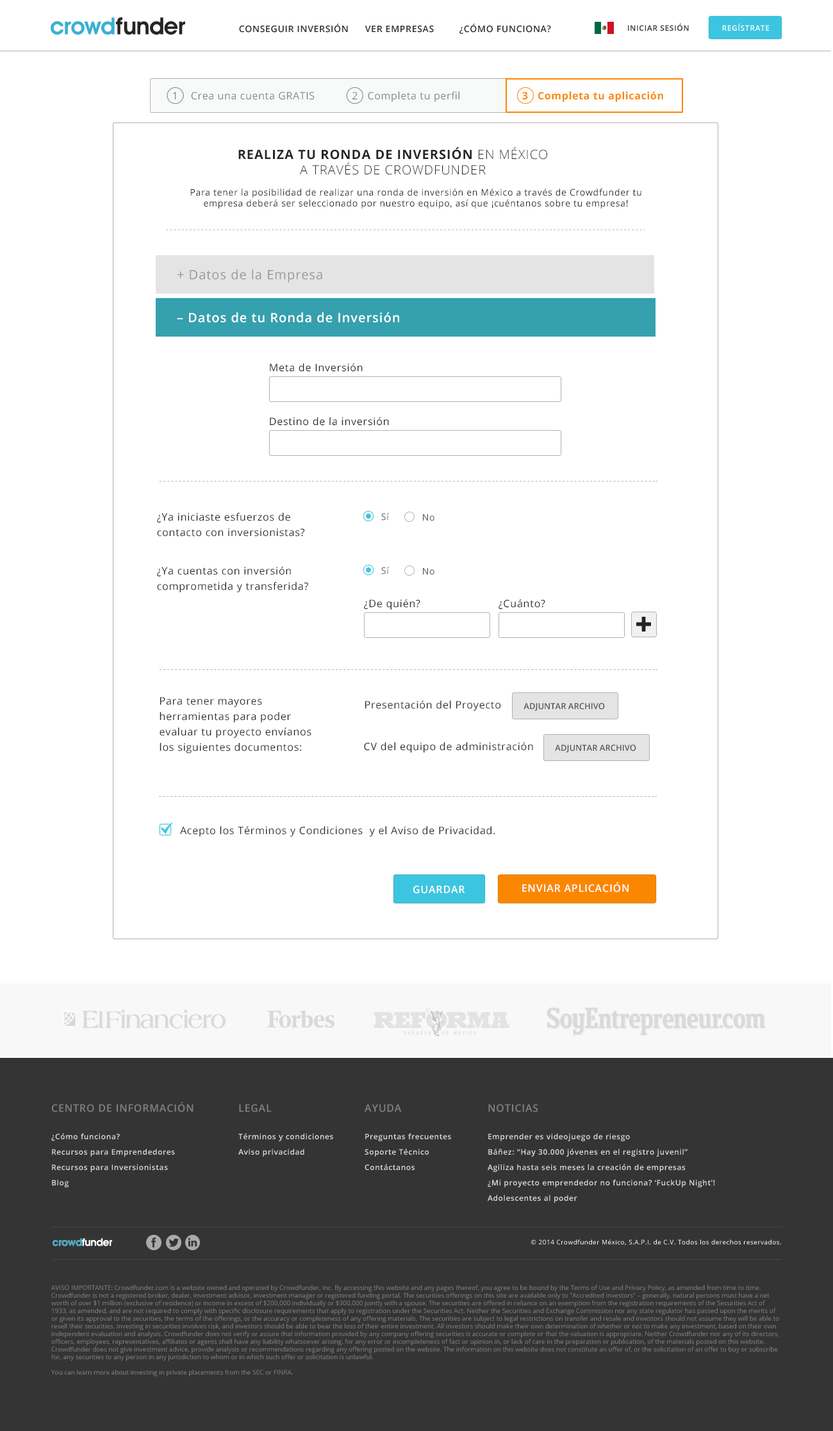
<style>
.page{position:relative;width:833px;height:1431px;background:#ffffff}
.page>*{position:absolute;margin:0}
.t1{font:10.3px "OpenSans";letter-spacing:0.04em;color:#858585}
.t2{font:10.3px "OpenSans-Bold";letter-spacing:0.04em;color:#fb8701}
.t3{font:12.8px "OpenSans-Light";letter-spacing:0.05em;color:#252525;text-transform:uppercase}
.t4{font:12.8px "OpenSans-Bold";letter-spacing:0.05em;color:#252525;text-transform:uppercase}
.t5{font:9px "OpenSans";letter-spacing:0.05em;color:#252525}
.t6{font:12.8px "OpenSans";letter-spacing:0.05em;color:#94979b}
.t7{font:12.8px "OpenSans-Semibold";letter-spacing:0.05em;color:#ffffff}
.t8{font:10.3px "OpenSans";letter-spacing:0.05em;color:#252525}
.t9{font:10.3px/15.4px "OpenSans";letter-spacing:0.05em;color:#252525}
.t10{font:9px "OpenSans";letter-spacing:0.05em;color:#555555}
.t11{font:8.3px "OpenSans-Semibold";color:#555555;text-transform:uppercase}
.t12{font:10.3px "OpenSans-Semibold";letter-spacing:0.05em;color:#ffffff;text-transform:uppercase}
</style>
<div class="page">
<p class="t1" style="left:173px;top:91px;width:490px;height:11px">1    Crea una cuenta GRATIS            2   Completa tu perfil                    <span class="t2">3   Completa tu aplicación</span></p>
<p class="t3" style="left:238px;top:147px;width:309px;height:28px;text-align:center"><span class="t4">realiza tu ronda de inversión</span> En MÉXICO <br>A TRAVÉS DE CROWDFUNDER</p>
<p class="t5" style="left:190px;top:188px;width:452px;height:21px;text-align:center">Para tener la posibilidad de realizar una ronda de inversión en México a través de Crowdfunder tu<br>empresa deberá ser seleccionado por nuestro equipo, así que ¡cuéntanos sobre tu empresa!</p>
<p class="t6" style="left:178px;top:269px;width:144px;height:14px">+ Datos de la Empresa</p>
<p class="t7" style="left:177px;top:312px;width:222px;height:10px">– Datos de tu Ronda de Inversión</p>
<p class="t8" style="left:270px;top:363px;width:93px;height:9px">Meta de Inversión</p>
<p class="t8" style="left:270px;top:417px;width:119px;height:9px">Destino de la inversión</p>
<p class="t9" style="left:157px;top:512px;width:148px;height:25px">¿Ya iniciaste esfuerzos de <br>contacto con inversionistas?</p>
<p class="t10" style="left:381px;top:513px;width:8px;height:8px">Sí</p>
<p class="t10" style="left:423px;top:514px;width:12px;height:7px">No</p>
<p class="t9" style="left:157px;top:566px;width:151px;height:26px">¿Ya cuentas con inversión <br>comprometida y transferida?</p>
<p class="t10" style="left:381px;top:567px;width:8px;height:7px">Sí</p>
<p class="t10" style="left:423px;top:568px;width:12px;height:7px">No</p>
<p class="t8" style="left:364px;top:599px;width:57px;height:11px">¿De quién?</p>
<p class="t8" style="left:499px;top:599px;width:47px;height:10px">¿Cuánto?</p>
<p class="t9" style="left:160px;top:697px;width:152px;height:56px">Para tener mayores  herramientas para poder evaluar tu proyecto envíanos los siguientes documentos:</p>
<p class="t8" style="left:365px;top:700px;width:136px;height:11px">Presentación del Proyecto</p>
<p class="t11" style="left:524px;top:703px;width:81px;height:8px">Adjuntar archivo</p>
<p class="t8" style="left:364px;top:742px;width:169px;height:11px">CV del equipo de administración</p>
<p class="t11" style="left:555px;top:744px;width:82px;height:9px">Adjuntar archivo</p>
<p class="t8" style="left:180px;top:826px;width:316px;height:11px">Acepto los Términos y Condiciones  y el Aviso de Privacidad.</p>
<p class="t12" style="left:413px;top:885px;width:52px;height:9px">GUARDAR</p>
<p class="t12" style="left:522px;top:882px;width:107px;height:10px">ENVIAR APLICACIÓN</p>
</div>
